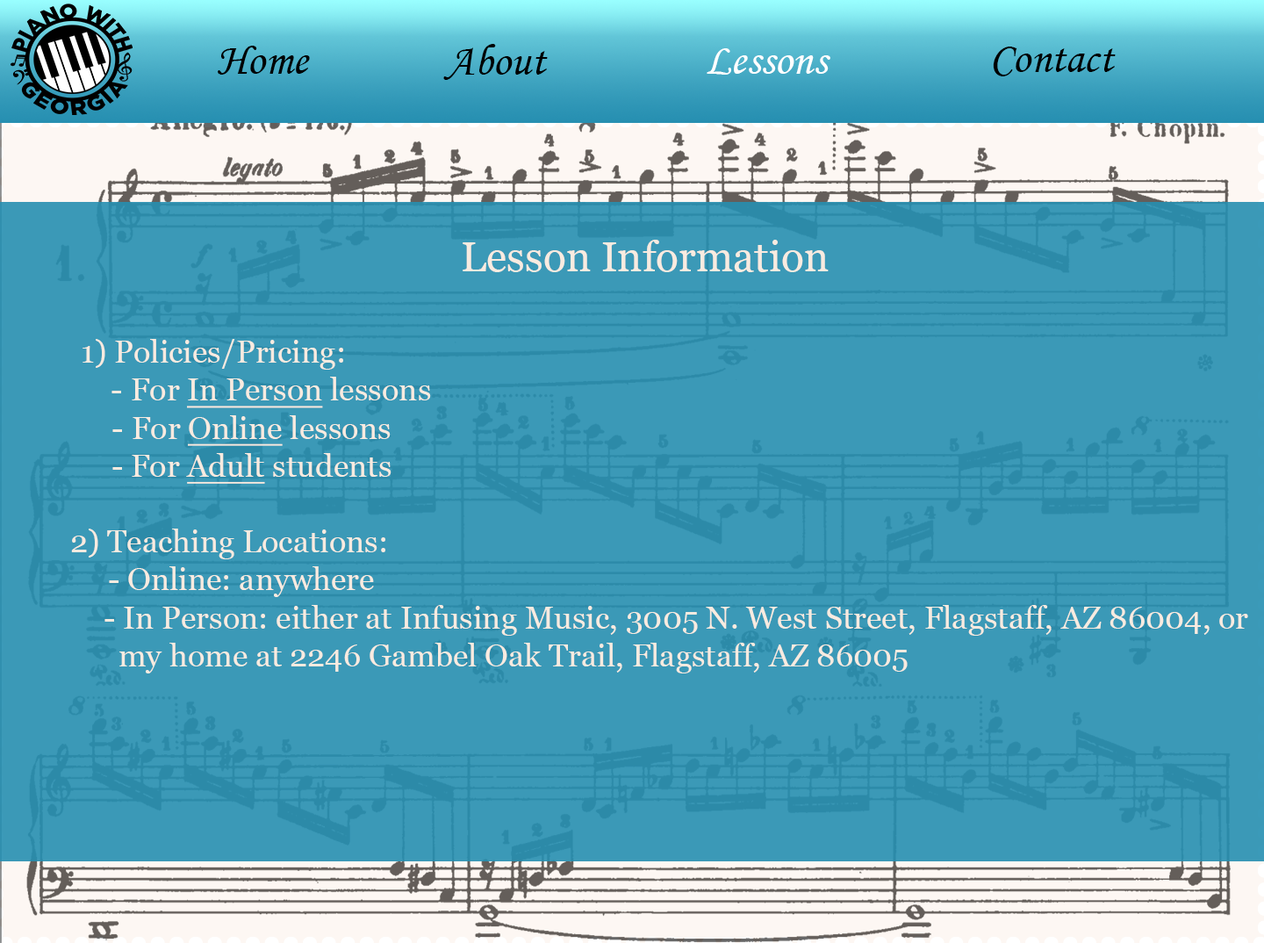
<style>
.page{position:relative;width:1264px;height:943px;background:#3b99b7}
.page>*{position:absolute;margin:0}
.t1{font:44.4px "MonotypeCorsiva";color:#000000}
.t2{font:44.4px "MonotypeCorsiva";color:#ffffff}
.t3{font:42.1px "Georgia";color:#f9ebe0}
.t4{font:31.6px "Georgia";color:#f9ebe0}
.t5{font:31.6px "Georgia";color:#f9ebe0;text-decoration:underline}
</style>
<div class="page">
<p class="t1" style="left:218px;top:46px;width:92px;height:29px">Home</p>
<p class="t1" style="left:443px;top:44px;width:105px;height:36px">About</p>
<p class="t2" style="left:707px;top:48px;width:124px;height:27px">Lessons</p>
<p class="t1" style="left:993px;top:47px;width:123px;height:29px">Contact</p>
<p class="t3" style="left:463px;top:240px;width:366px;height:32px">Lesson Information</p>
<p class="t4" style="left:71px;top:339px;width:1178px;height:334px;text-align:center">1) Policies/Pricing:<br>             - For <span class="t5">In Person</span> lessons<br>          - For <span class="t5">Online</span> lessons<br>          - For <span class="t5">Adult</span> students<br><br> 2) Teaching Locations:<br>  - Online: anywhere <br>                                                                                                                  - In Person: either at Infusing Music, 3005 N. West Street, Flagstaff, AZ 86004, or   <br>                                                                         my home at 2246 Gambel Oak Trail, Flagstaff, AZ 86005</p>
</div>
